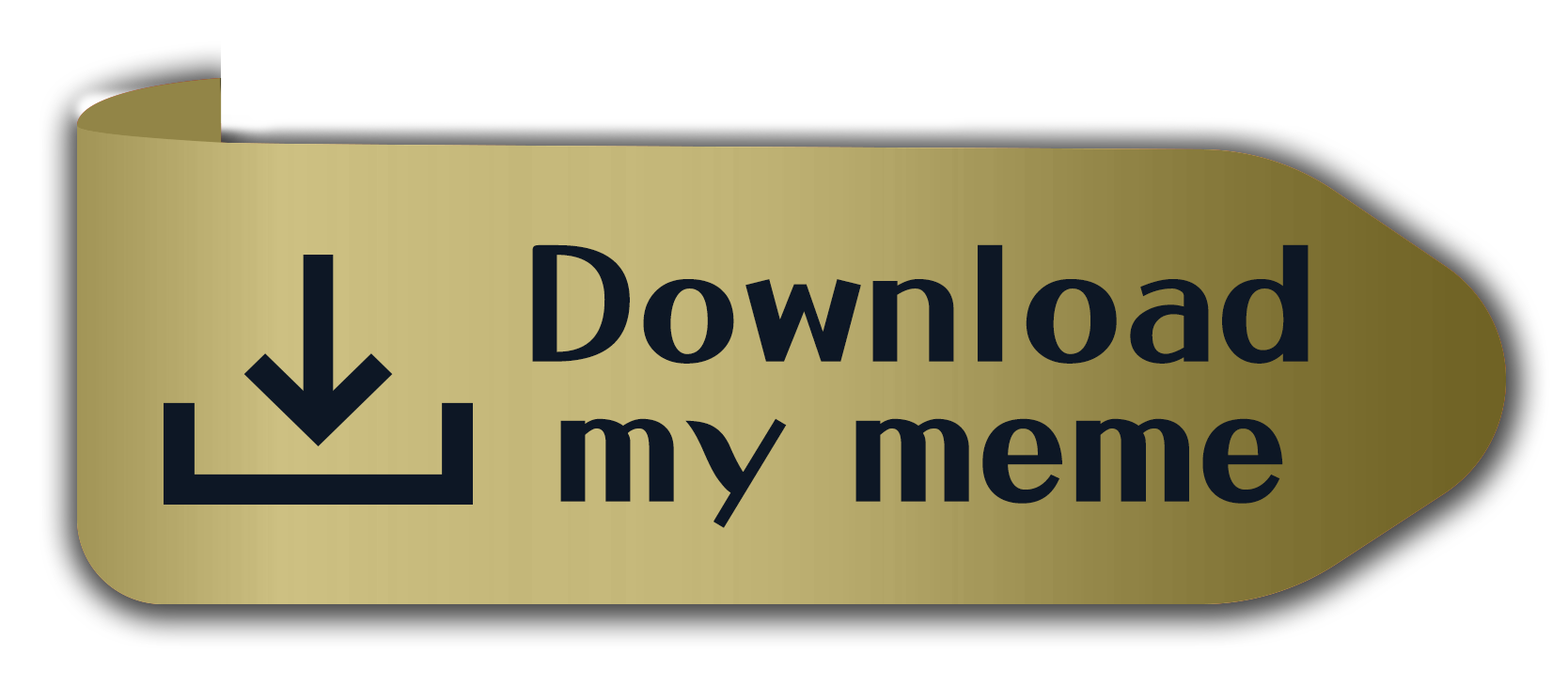
<style>
.page{position:relative;width:1568px;height:685px;background:#ffffff}
.page>*{position:absolute;margin:0}
.t1{font:174.3px "DFLangManXue-W9-WINP-BF";color:#0d1725}
</style>
<div class="page">
<p class="t1" style="left:532px;top:244px;width:777px;height:120px">Download</p>
<p class="t1" style="left:560px;top:418px;width:723px;height:110px">my meme</p>
</div>
